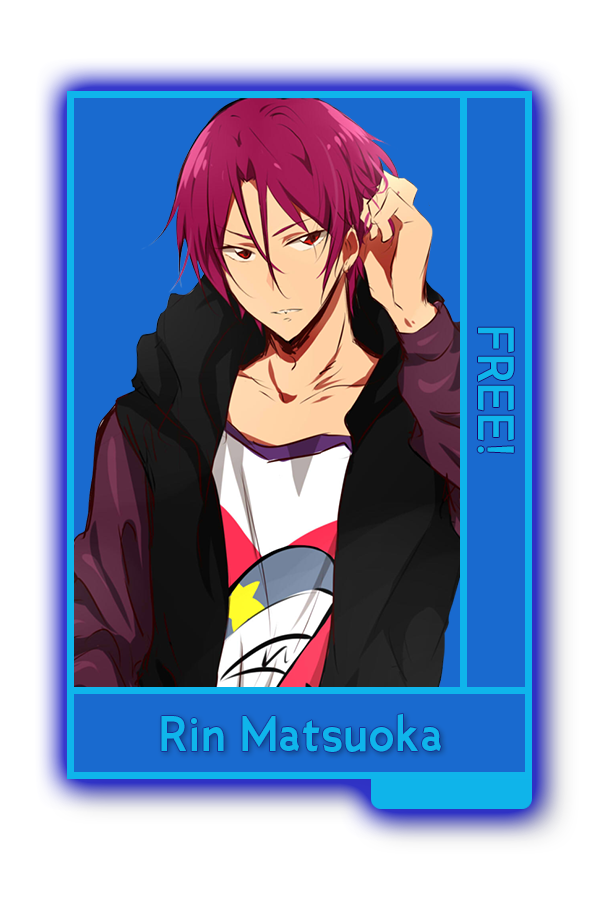
<style>
.page{position:relative;width:600px;height:900px;background:#ffffff}
.page>*{position:absolute;margin:0}
.t1{font:47.8px "Ancillary-Bold";color:#0fb5eb}
.t2{font:46.7px "Ancillary-Bold";color:#0fb5eb}
</style>
<div class="page">
<p class="t1" style="left:477px;top:327px;width:37px;height:126px;rotate:90deg">FREE!</p>
<p class="t2" style="left:161px;top:713px;width:280px;height:39px">Rin Matsuoka</p>
</div>
